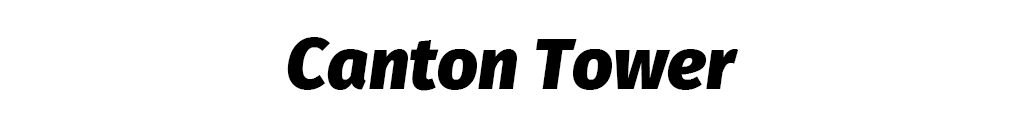
<style>
.page{position:relative;width:1024px;height:128px;background:#ffffff}
.page>*{position:absolute;margin:0}
.t1{font:71.8px "FiraSans-BlackItalic";color:#000000}
</style>
<div class="page">
<p class="t1" style="left:287px;top:37px;width:452px;height:54px">Canton Tower</p>
</div>
